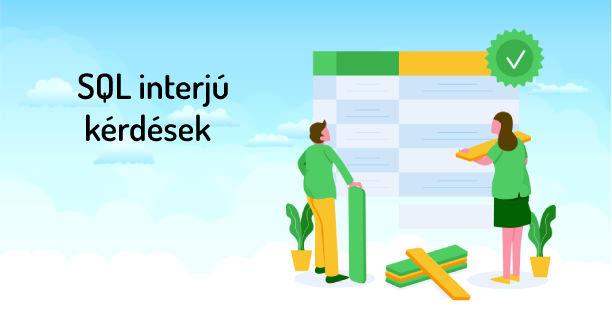
<style>
.page{position:relative;width:612px;height:331px}
.page>*{position:absolute;margin:0}
.t1{font:35px "Dosis-SemiBold";color:#000000}
</style>
<div class="page">
<p class="t1" style="left:78px;top:73px;width:150px;height:69px">SQL interjú<br> kérdések</p>
</div>
